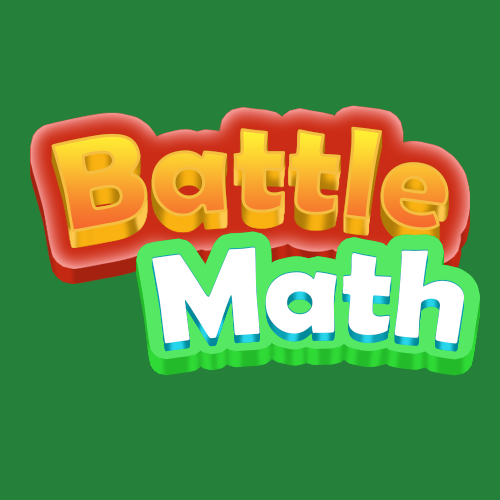
<style>
.page{position:relative;width:500px;height:500px;background:#25803a}
.page>*{position:absolute;margin:0}
.t1{font:131.6px "BerlinSansFBDemi-Bold"}
.t2{font:125px "BerlinSansFBDemi-Bold";color:#ffffff}
</style>
<div class="page">
<p class="t1" style="left:51px;top:126px;width:398px;height:107px">Battle</p>
<p class="t2" style="left:152px;top:247px;width:312px;height:97px">Math</p>
</div>
